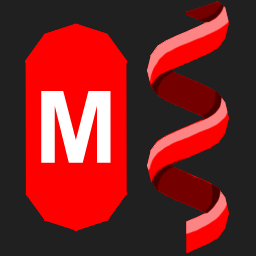
<style>
.page{position:relative;width:256px;height:256px;background:#202020}
.page>*{position:absolute;margin:0}
.t1{font:100px "Arial-BoldMT";letter-spacing:0.05em;color:#ffffff}
</style>
<div class="page">
<p class="t1" style="left:41px;top:91px;width:70px;height:72px">M</p>
</div>
